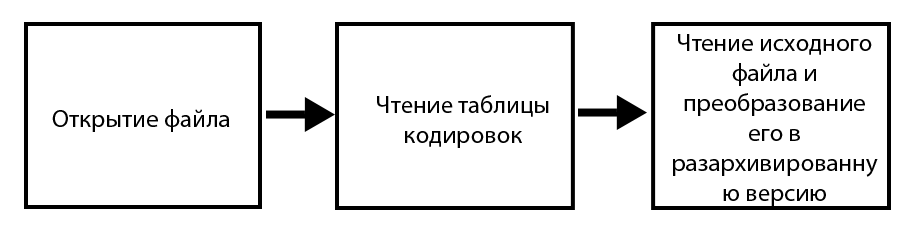
<style>
.page{position:relative;width:921px;height:235px;background:#ffffff}
.page>*{position:absolute;margin:0}
.t1{font:25px "MyriadPro-Regular";color:#000000}
</style>
<div class="page">
<p class="t1" style="left:673px;top:34px;width:205px;height:172px;text-align:center">Чтение исходного файла и преобразование его в разархивированную версию</p>
<p class="t1" style="left:377px;top:95px;width:172px;height:53px;text-align:center">Чтение таблицы кодировок</p>
<p class="t1" style="left:52px;top:109px;width:178px;height:23px">Открытие файла</p>
</div>
